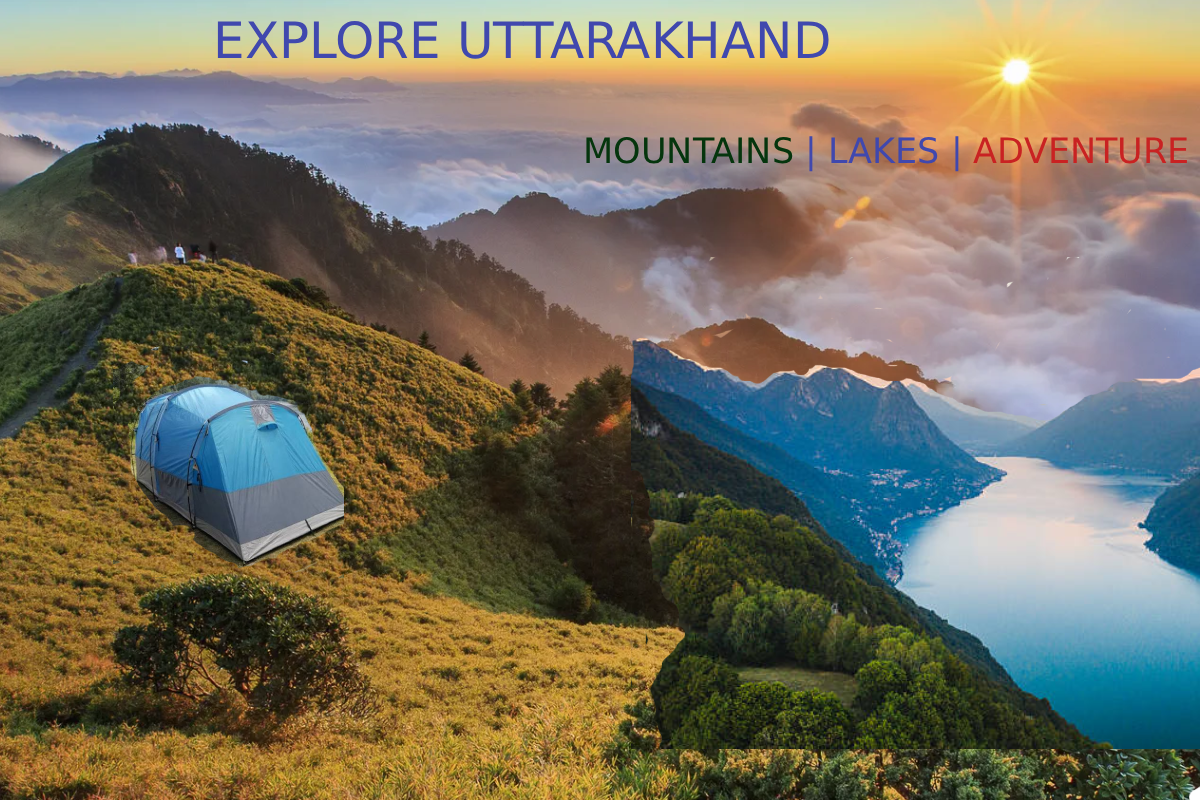
<style>
.page{position:relative;width:1200px;height:800px}
.page>*{position:absolute;margin:0}
.t1{font:50px "LucidaSans-Typewriter";color:#4048ae}
.t2{font:35px "LucidaSans-Typewriter";color:#05350d}
.t3{font:35px "LucidaSans-Typewriter";color:#4048ae}
.t4{font:35px "LucidaSans-Typewriter";color:#c92222}
</style>
<div class="page">
<p class="t1" style="left:217px;top:20px;width:612px;height:39px">EXPLORE UTTARAKHAND</p>
<p class="t2" style="left:586px;top:136px;width:601px;height:36px">MOUNTAINS<span class="t3"> | LAKES | </span><span class="t4">ADVENTURE</span></p>
</div>
